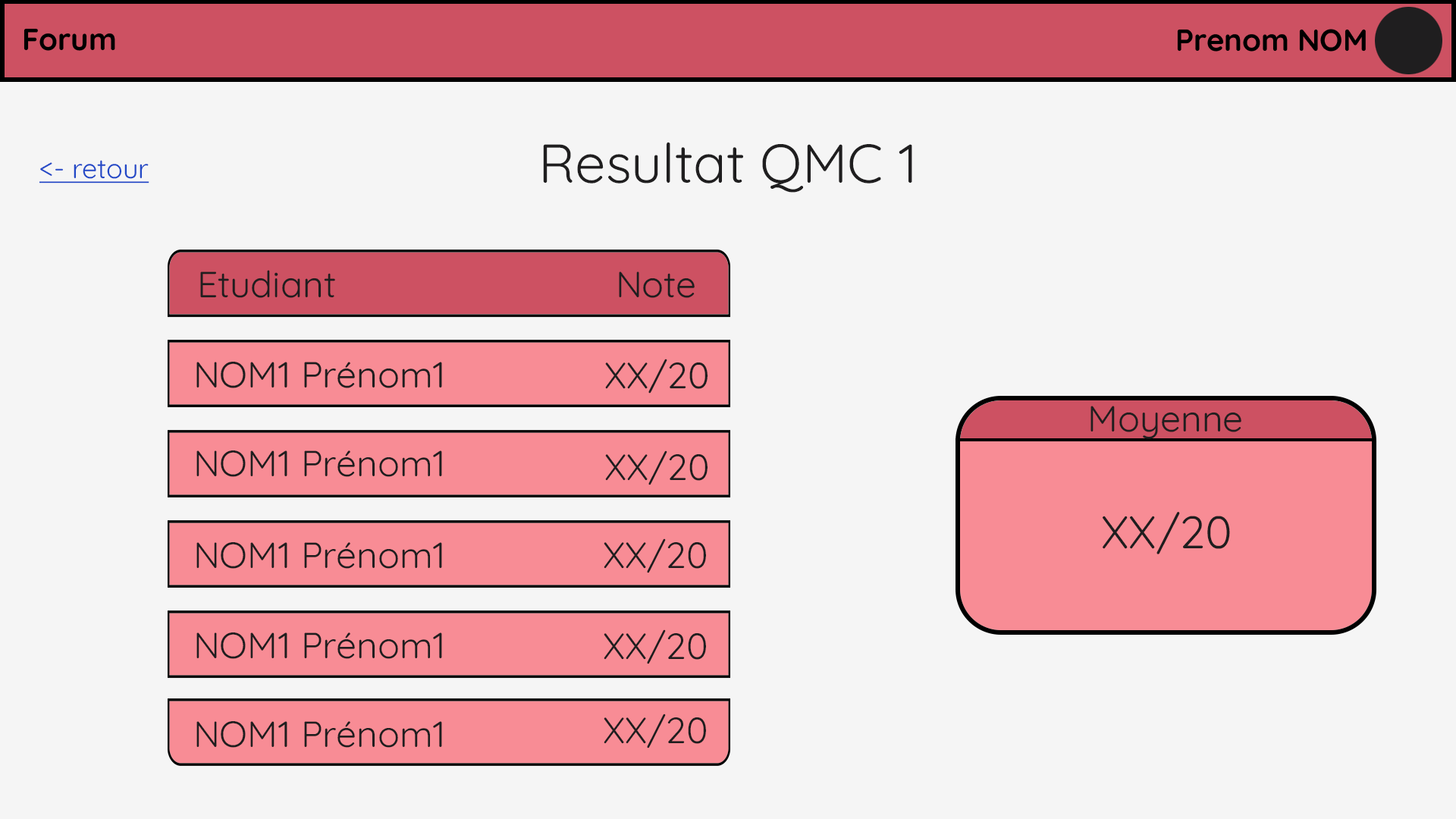
<style>
.page{position:relative;width:1456px;height:819px;background:#f5f5f5}
.page>*{position:absolute;margin:0}
.t1{font:54.6px "Quicksand-Regular";color:#1f1e1f}
.t2{font:27.3px "Quicksand-Regular";color:#2148c7;text-decoration:underline}
.t3{font:36.4px "Quicksand-Regular";color:#1f1e1f}
.t4{font:45.5px "Quicksand-Regular";color:#1f1e1f}
</style>
<div class="page">
<p class="t1" style="left:543px;top:142px;width:369px;height:51px">Resultat QMC 1</p>
<p class="t2" style="left:39px;top:160px;width:110px;height:24px">&lt;- retour</p>
<p class="t3" style="left:200px;top:270px;width:135px;height:28px">Etudiant</p>
<p class="t3" style="left:619px;top:271px;width:76px;height:27px">Note</p>
<p class="t3" style="left:196px;top:361px;width:246px;height:27px">NOM1 Prénom1</p>
<p class="t3" style="left:605px;top:359px;width:103px;height:35px">XX/20</p>
<p class="t3" style="left:1090px;top:406px;width:151px;height:33px">Moyenne</p>
<p class="t3" style="left:196px;top:450px;width:246px;height:27px">NOM1 Prénom1</p>
<p class="t3" style="left:605px;top:450px;width:103px;height:35px">XX/20</p>
<p class="t4" style="left:1103px;top:512px;width:127px;height:42px">XX/20</p>
<p class="t3" style="left:196px;top:542px;width:246px;height:27px">NOM1 Prénom1</p>
<p class="t3" style="left:604px;top:538px;width:102px;height:35px">XX/20</p>
<p class="t3" style="left:604px;top:629px;width:102px;height:35px">XX/20</p>
<p class="t3" style="left:196px;top:632px;width:246px;height:27px">NOM1 Prénom1</p>
<p class="t3" style="left:604px;top:714px;width:102px;height:34px">XX/20</p>
<p class="t3" style="left:196px;top:721px;width:246px;height:27px">NOM1 Prénom1</p>
</div>
